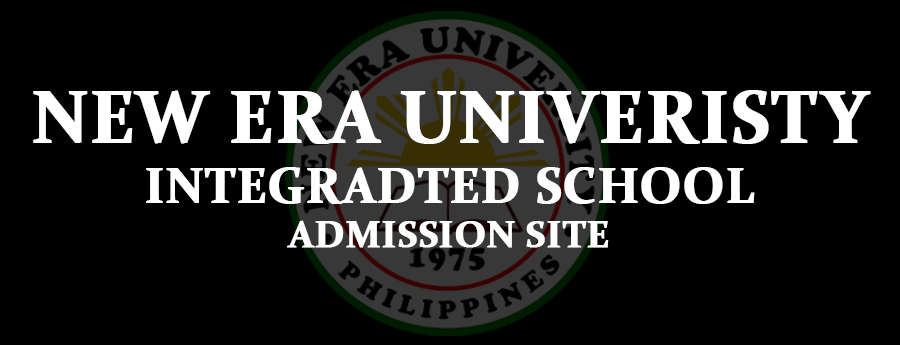
<style>
.page{position:relative;width:900px;height:345px;background:#000000}
.page>*{position:absolute;margin:0}
.t1{font:74.1px "Constantia-Bold";color:#ffffff;font-weight:bold}
.t2{font:50px "Constantia-Bold";color:#ffffff;font-weight:bold}
.t3{font:37.5px "Constantia-Bold";color:#ffffff;font-weight:bold}
</style>
<div class="page">
<p class="t1" style="left:33px;top:90px;width:838px;height:158px;text-align:center">NEW ERA UNIVERISTY<br><span class="t2">INTEGRADTED SCHOOL<br></span><span class="t3">ADMISSION SITE</span></p>
</div>
